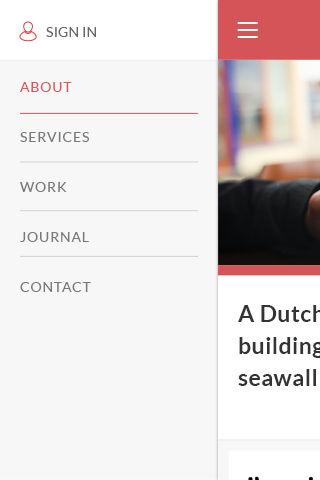
<style>
.page{position:relative;width:320px;height:480px;background:#f7f7f7}
.page>*{position:absolute;margin:0}
.t1{font:14px "Lato-Regular";letter-spacing:0.01em;color:#666666}
.t2{font:14px/50px "Lato-Regular";letter-spacing:0.06em;color:#666666}
.t3{font:14px/50px "Lato-Regular";letter-spacing:0.06em;color:#d04144}
</style>
<div class="page">
<p class="t1" style="left:46px;top:27px;width:50px;height:10px">SIGN IN</p>
<p class="t2" style="left:20px;top:82px;width:71px;height:210px;opacity:0.9"><span class="t3">ABOUT<br></span>SERVICES<br>WORK<br>JOURNAL <br>CONTACT</p>
</div>
